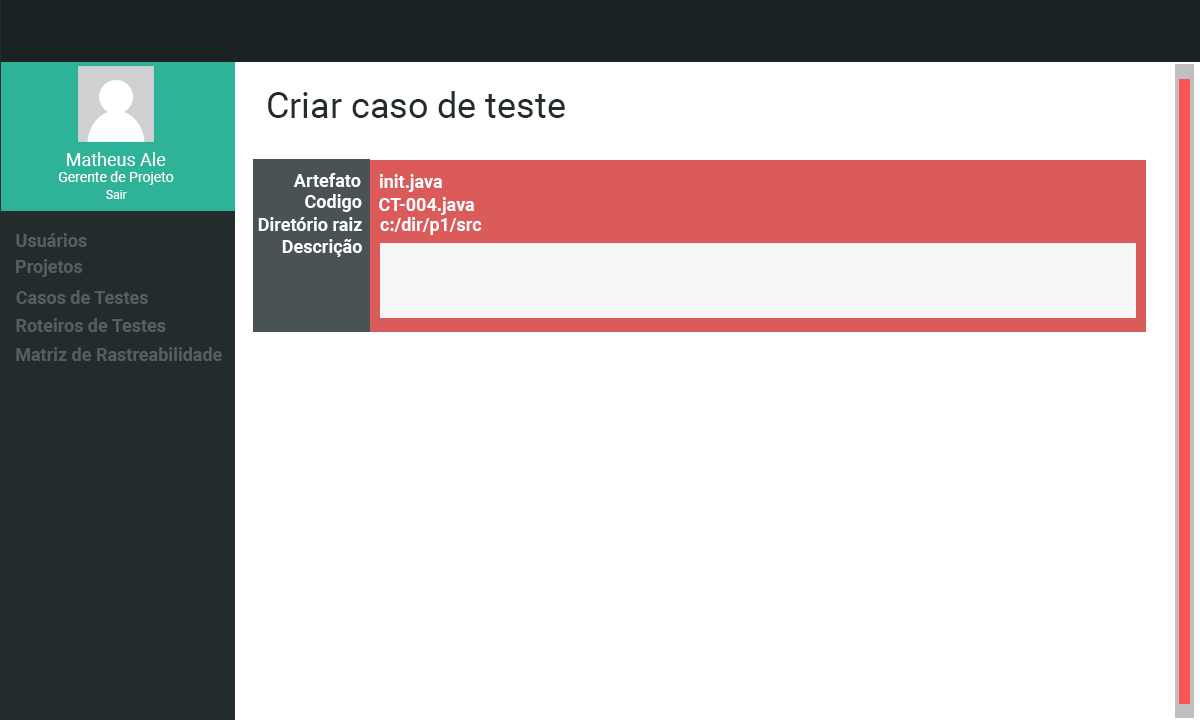
<style>
.page{position:relative;width:1200px;height:720px;background:#ffffff}
.page>*{position:absolute;margin:0}
.t1{font:36px "Roboto-Regular";color:#242c2e}
.t2{font:18.1px "Roboto-Regular";color:#ffffff}
.t3{font:14.1px "Roboto-Regular";color:#ffffff}
.t4{font:17.9px "Roboto-Bold";color:#fefefe}
.t5{font:18px "Roboto-Bold";color:#fefefe}
.t6{font:12.1px "Roboto-Regular";color:#ffffff}
.t7{font:18px "Roboto-Bold";color:#545f61}
</style>
<div class="page">
<p class="t1" style="left:268px;top:91px;width:297px;height:27px">Criar caso de teste</p>
<p class="t2" style="left:67px;top:152px;width:99px;height:14px">Matheus Ale</p>
<p class="t3" style="left:59px;top:171px;width:115px;height:14px">Gerente de Projeto</p>
<p class="t4" style="left:293px;top:173px;width:68px;height:14px">Artefato</p>
<p class="t5" style="left:380px;top:174px;width:62px;height:18px">init.java</p>
<p class="t6" style="left:106px;top:190px;width:21px;height:9px">Sair</p>
<p class="t5" style="left:305px;top:194px;width:57px;height:18px">Codigo</p>
<p class="t5" style="left:379px;top:197px;width:95px;height:18px">CT-004.java</p>
<p class="t4" style="left:258px;top:217px;width:104px;height:14px">Diretório raiz</p>
<p class="t5" style="left:380px;top:217px;width:102px;height:18px">c:/dir/p1/src</p>
<p class="t7" style="left:16px;top:233px;width:71px;height:14px">Usuários</p>
<p class="t4" style="left:282px;top:239px;width:80px;height:18px">Descrição</p>
<p class="t7" style="left:16px;top:259px;width:67px;height:18px">Projetos</p>
<p class="t7" style="left:16px;top:290px;width:132px;height:14px">Casos de Testes</p>
<p class="t7" style="left:16px;top:318px;width:150px;height:14px">Roteiros de Testes</p>
<p class="t7" style="left:16px;top:347px;width:206px;height:14px">Matriz de Rastreabilidade</p>
</div>
